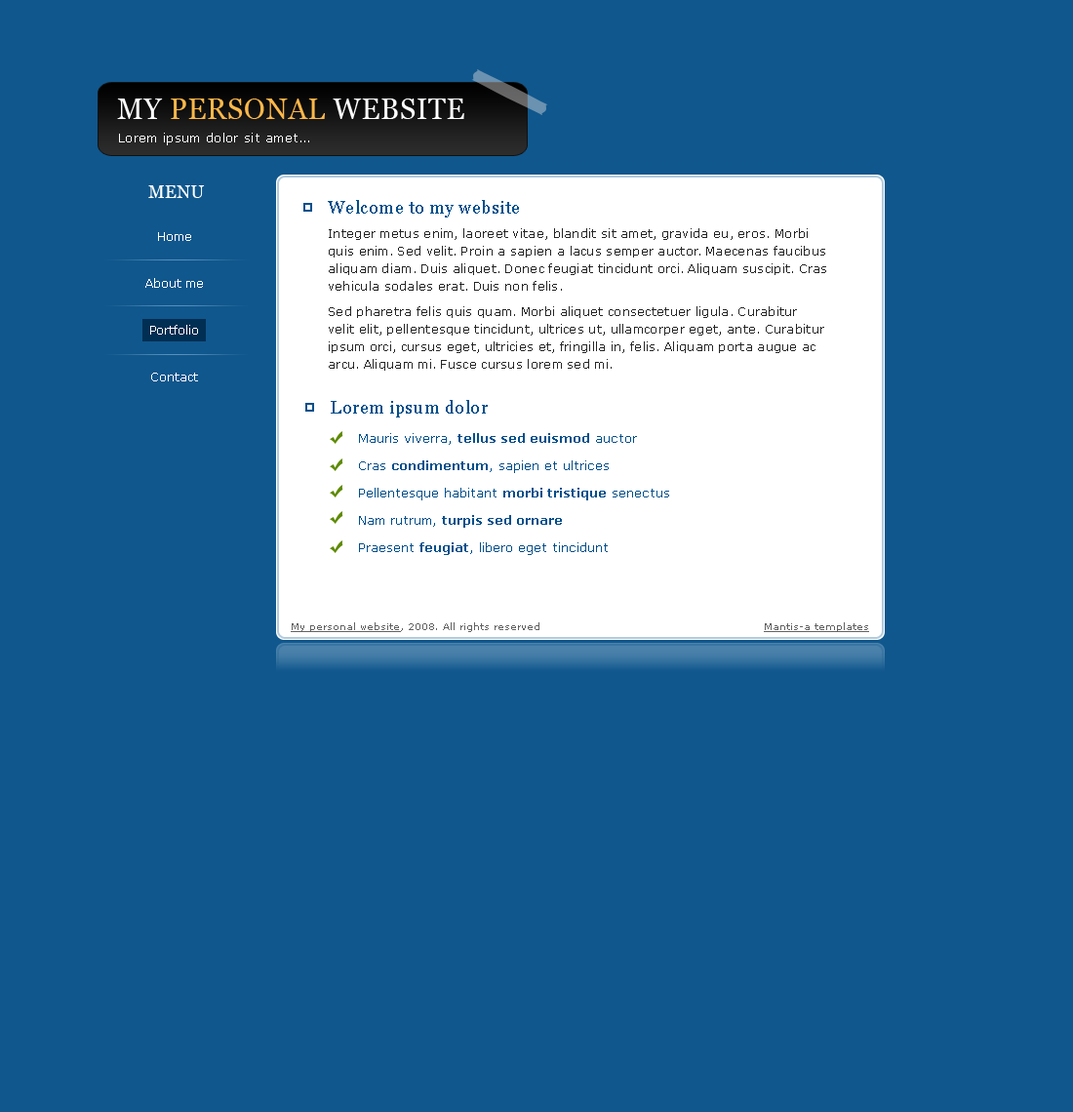
<style>
.page{position:relative;width:1073px;height:1112px;background:#10578d}
.page>*{position:absolute;margin:0}
.t1{font:28.3px "Georgia";letter-spacing:0.025em;color:#ffb849}
.t2{font:28.3px "Georgia";letter-spacing:0.025em;color:#ffffff}
.t3{font:12.7px "Verdana";letter-spacing:0.025em;color:#ffffff}
.t4{font:12.7px "Verdana";letter-spacing:-0.1em;color:#ffffff}
.t5{font:17.6px "Georgia";letter-spacing:0.025em;color:#ffffff}
.t6{font:17.6px "Georgia";letter-spacing:0.025em;color:#004f8b}
.t7{font:11.7px/46.8px "Verdana";color:#ffffff}
.t8{font:11.7px/17.6px "Verdana";letter-spacing:0.025em;color:#242424}
.t9{font:11.7px/17.6px "Verdana";letter-spacing:0.025em;color:#262626}
.t10{font:12.7px/27.3px "Verdana";color:#004f8b}
.t11{font:12.7px/27.3px "Verdana-Bold";color:#004f8b}
.t12{font:9.8px "Verdana";color:#626262}
.t13{font:9.8px "Verdana";color:#626262;text-decoration:underline}
</style>
<div class="page">
<p class="t1" style="left:117px;top:98px;width:347px;height:21px"><span class="t2">MY </span>PERSONAL <span class="t2">WEBSITE</span></p>
<p class="t3" style="left:119px;top:133px;width:190px;height:12px">Lorem ipsum dolor sit amet<span class="t4">...</span></p>
<p class="t5" style="left:148px;top:185px;width:57px;height:13px">MENU</p>
<p class="t6" style="left:328px;top:200px;width:191px;height:17px">Welcome to my website</p>
<p class="t7" style="left:145px;top:232px;width:58px;height:149px;text-align:center">Home<br>About me<br>Portfolio<br>Contact</p>
<p class="t8" style="left:329px;top:228px;width:497px;height:63px">Integer metus enim, laoreet vitae, blandit sit amet, gravida eu, eros. Morbi quis enim. Sed velit. Proin a sapien a lacus semper auctor. Maecenas faucibus aliquam diam. Duis aliquet. Donec feugiat tincidunt orci. Aliquam suscipit. Cras vehicula sodales erat. Duis non felis.</p>
<p class="t9" style="left:329px;top:306px;width:495px;height:65px">Sed pharetra felis quis quam. Morbi aliquet consectetuer ligula. Curabitur velit elit, pellentesque tincidunt, ultrices ut, ullamcorper eget, ante. Curabitur ipsum orci, cursus eget, ultricies et, fringilla in, felis. Aliquam porta augue ac arcu. Aliquam mi. Fusce cursus lorem sed mi.</p>
<p class="t6" style="left:331px;top:400px;width:157px;height:17px">Lorem ipsum dolor</p>
<p class="t10" style="left:359px;top:433px;width:310px;height:122px">Mauris viverra, <span class="t11">tellus sed euismod</span> auctor<br>Cras <span class="t11">condimentum</span>, sapien et ultrices<br>Pellentesque habitant <span class="t11">morbi tristique</span> senectus<br>Nam rutrum, <span class="t11">turpis sed ornare<br></span>Praesent <span class="t11">feugiat</span>, libero eget tincidunt</p>
<p class="t12" style="left:291px;top:622px;width:248px;height:10px"><span class="t13">My personal website</span>, 2008. All rights reserved</p>
<p class="t13" style="left:764px;top:622px;width:105px;height:10px">Mantis-a templates</p>
</div>
